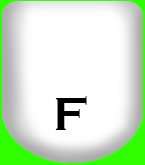
<style>
.page{position:relative;width:145px;height:165px;background:#ffffff}
.page>*{position:absolute;margin:0}
.t1{font:48px "CopperplateGothic-Bold";color:#000000}
</style>
<div class="page">
<p class="t1" style="left:55px;top:96px;width:32px;height:34px">F</p>
</div>
